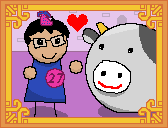
<style>
.page{position:relative;width:168px;height:128px}
.page>*{position:absolute;margin:0}
.t1{font:13.7px "GillSans-SemiBoldItalic";color:#7b1854;scale:1.13 1}
</style>
<div class="page">
<p class="t1" style="left:48px;top:73px;width:16px;height:10px">27</p>
</div>
